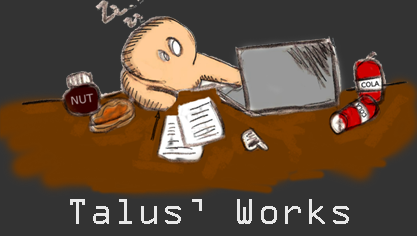
<style>
.page{position:relative;width:417px;height:236px;background:#333333}
.page>*{position:absolute;margin:0}
.t1{font:38.2px "OCRAExtended";color:#e8e8e8}
</style>
<div class="page">
<p class="t1" style="left:70px;top:199px;width:279px;height:25px">Talus’ Works</p>
</div>
